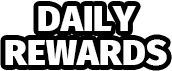
<style>
.page{position:relative;width:172px;height:71px;background:#ffffff}
.page>*{position:absolute;margin:0}
.t1{font:36px/34px "FiraSans-Black";color:#ffffff;text-transform:uppercase}
</style>
<div class="page">
<p class="t1" style="left:5px;top:6px;width:162px;height:60px;text-align:center">Daily<br>Rewards</p>
</div>
